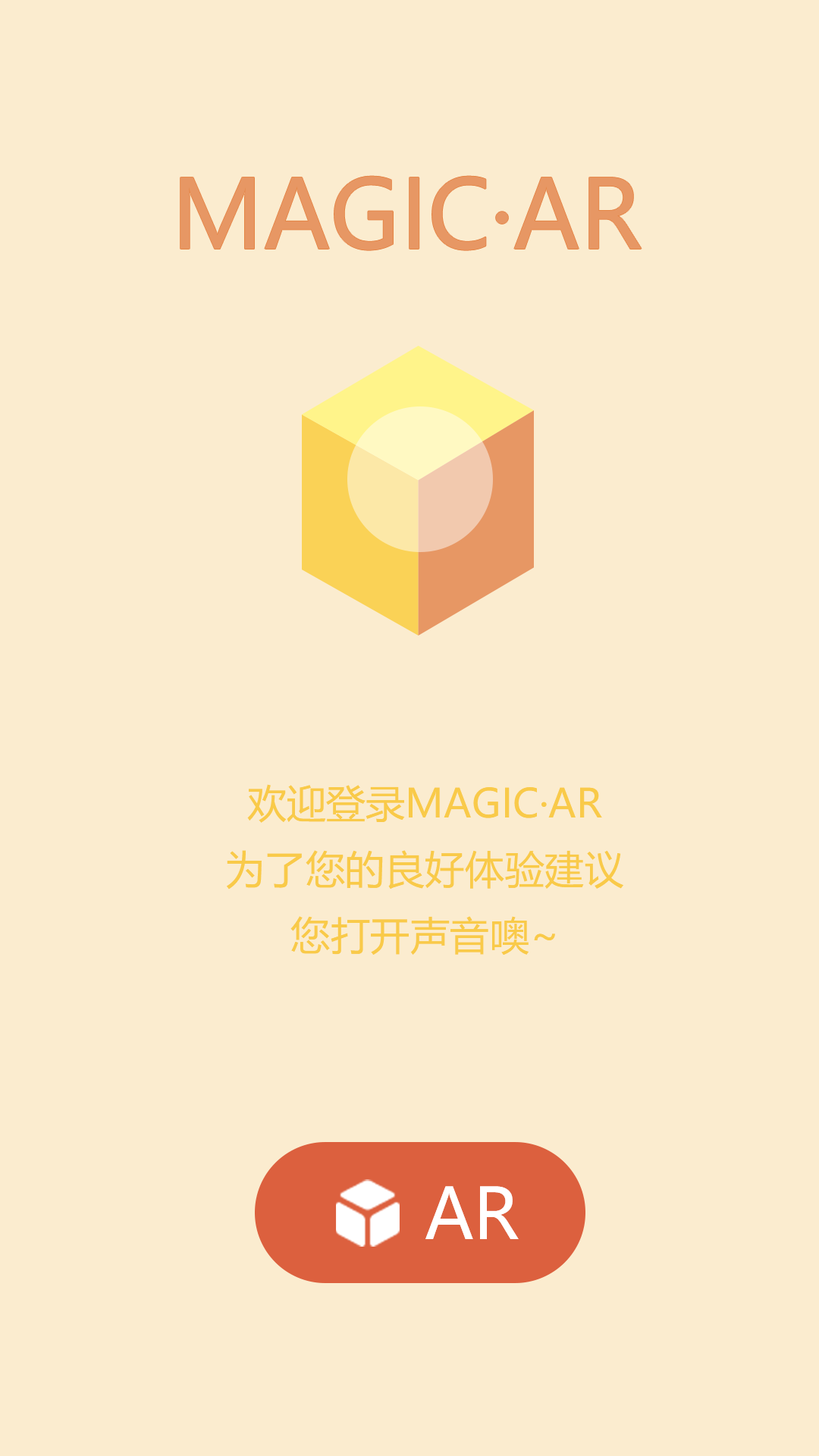
<style>
.page{position:relative;width:819px;height:1456px;background:#fbeccf}
.page>*{position:absolute;margin:0}
.t1{font:94.3px "MicrosoftYaHei";color:#e79764}
.t2{font:39.4px/66px "MicrosoftYaHei";color:#f9ca49}
.t3{font:69.7px "MicrosoftYaHei";color:#ffffff}
</style>
<div class="page">
<p class="t1" style="left:180px;top:176px;width:462px;height:74px">MAGIC·AR</p>
<p class="t2" style="left:227px;top:784px;width:396px;height:171px;text-align:center">欢迎登录MAGIC·AR<br>为了您的良好体验建议您打开声音噢~</p>
<p class="t3" style="left:425px;top:1186px;width:94px;height:53px">AR</p>
</div>
